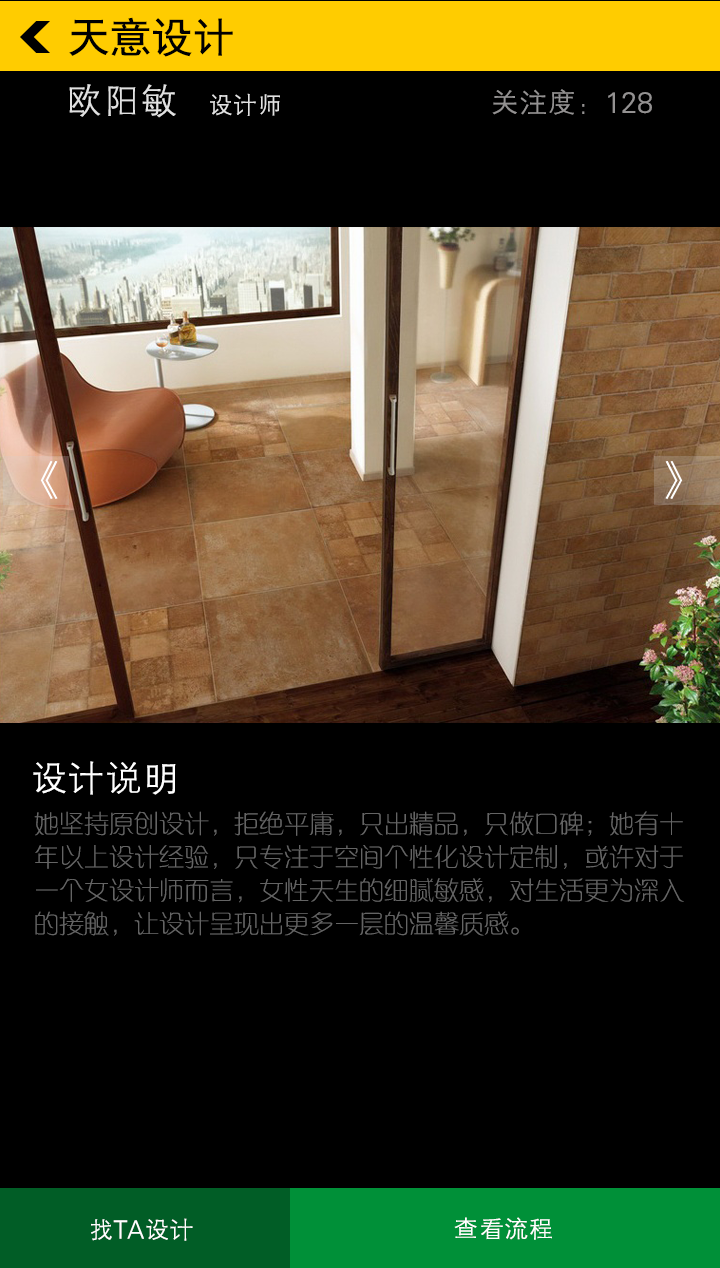
<style>
.page{position:relative;width:720px;height:1268px;background:#000000}
.page>*{position:absolute;margin:0}
.t1{font:41.7px "SimHei";color:#000000}
.t2{font:37.4px "FZXH1JW--GB1-0";color:#e1e1e1}
.t3{font:25px "FZXH1JW--GB1-0";color:#e1e1e1}
.t4{font:29.2px "FZXH1JW--GB1-0";color:#939191}
.t5{font:37.5px "FZXH1JW--GB1-0";color:#ffffff}
.t6{font:25px/33.3px "FZXQJW--GB1-0";color:#646464}
.t7{font:25px "FZXH1JW--GB1-0";color:#ffffff}
</style>
<div class="page">
<p class="t1" style="left:69px;top:17px;width:164px;height:40px">天意设计</p>
<p class="t2" style="left:69px;top:84px;width:211px;height:34px">欧阳敏   <span class="t3">设计师</span></p>
<p class="t4" style="left:492px;top:89px;width:160px;height:26px">关注度：128</p>
<p class="t5" style="left:33px;top:761px;width:143px;height:34px">设计说明</p>
<p class="t6" style="left:34px;top:811px;width:650px;height:125px">她坚持原创设计，拒绝平庸，只出精品，只做口碑；她有十<br>年以上设计经验，只专注于空间个性化设计定制，或许对于<br>一个女设计师而言，女性天生的细腻敏感，对生活更为深入<br>的接触，让设计呈现出更多一层的温馨质感。</p>
<p class="t7" style="left:454px;top:1217px;width:98px;height:23px">查看流程</p>
<p class="t7" style="left:91px;top:1218px;width:102px;height:23px">找TA设计</p>
</div>
